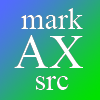
<style>
.page{position:relative;width:100px;height:100px}
.page>*{position:absolute;margin:0}
.t1{font:30px "TimesNewRomanPSMT";color:#ffffff}
.t2{font:48px "TimesNewRomanPSMT";color:#ffffff}
</style>
<div class="page">
<p class="t1" style="left:21px;top:8px;width:62px;height:21px">mark</p>
<p class="t1" style="left:21px;top:8px;width:62px;height:21px">mark</p>
<p class="t2" style="left:14px;top:35px;width:69px;height:33px">AX</p>
<p class="t2" style="left:14px;top:35px;width:69px;height:33px">AX</p>
<p class="t1" style="left:36px;top:76px;width:33px;height:14px">src</p>
<p class="t1" style="left:36px;top:76px;width:33px;height:14px">src</p>
</div>
